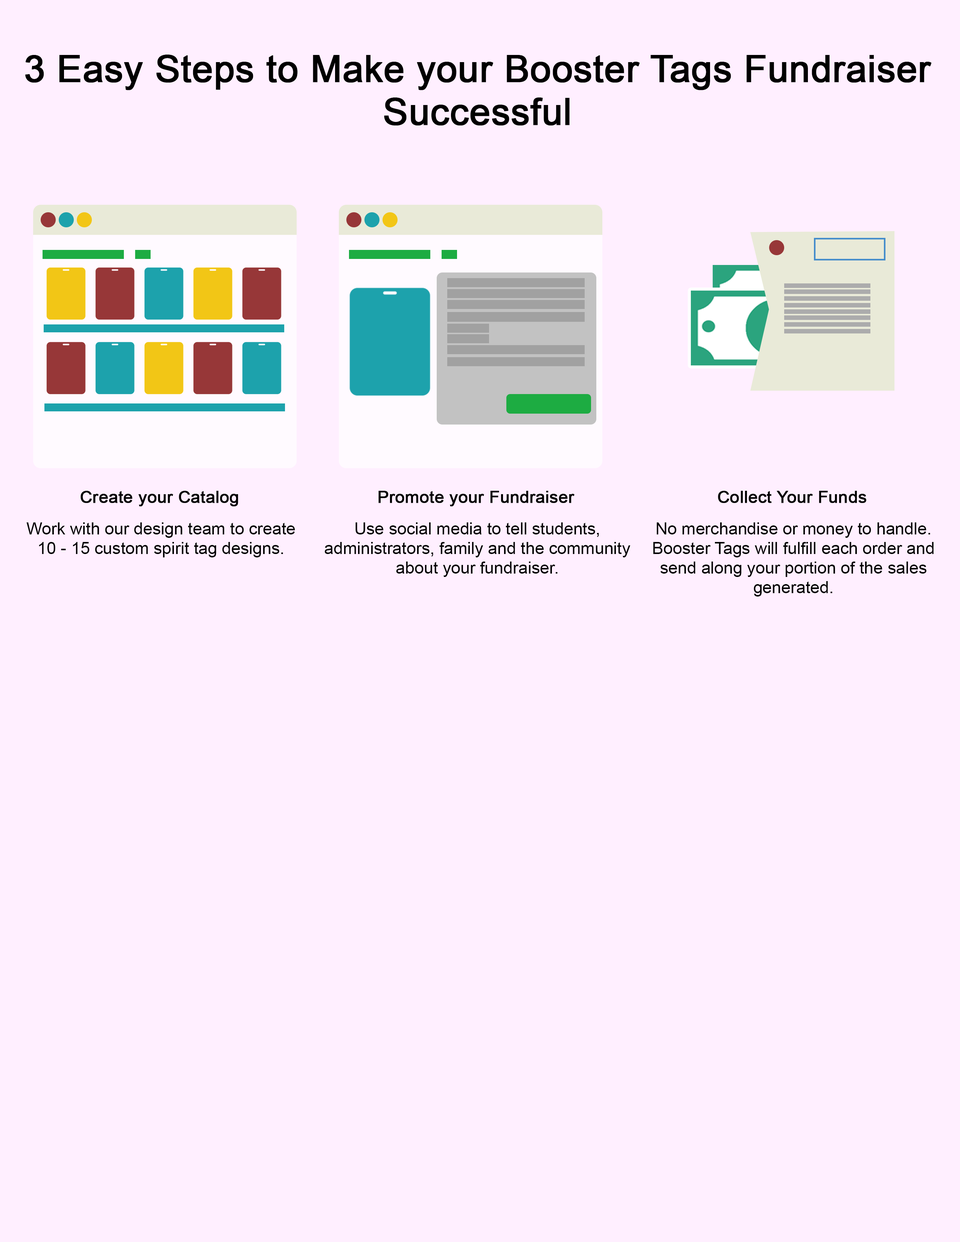
<style>
.page{position:relative;width:960px;height:1242px;background:#ffefff}
.page>*{position:absolute;margin:0}
.t1{font:37.1px/43.1px "ArialMT";color:#000000;font-weight:bold}
.t2{font:16.8px "ArialMT";color:#000000;font-weight:bold}
.t3{font:16.8px/19.6px "ArialMT";color:#000000}
</style>
<div class="page">
<p class="t1" style="left:25px;top:55px;width:906px;height:71px;text-align:center">3 Easy Steps to Make your Booster Tags Fundraiser<br>Successful</p>
<p class="t2" style="left:81px;top:491px;width:157px;height:16px">Create your Catalog</p>
<p class="t2" style="left:378px;top:491px;width:196px;height:16px">Promote your Fundraiser</p>
<p class="t2" style="left:718px;top:491px;width:148px;height:12px">Collect Your Funds</p>
<p class="t3" style="left:26px;top:522px;width:269px;height:36px;text-align:center">Work with our design team to create<br>10 - 15 custom spirit tag designs.</p>
<p class="t3" style="left:324px;top:522px;width:307px;height:55px;text-align:center">Use social media to tell students,<br>administrators, family and the community<br>about your fundraiser.</p>
<p class="t3" style="left:653px;top:522px;width:281px;height:75px;text-align:center">No merchandise or money to handle.<br>Booster Tags will fulfill each order and<br>send along your portion of the sales<br>generated.</p>
</div>
